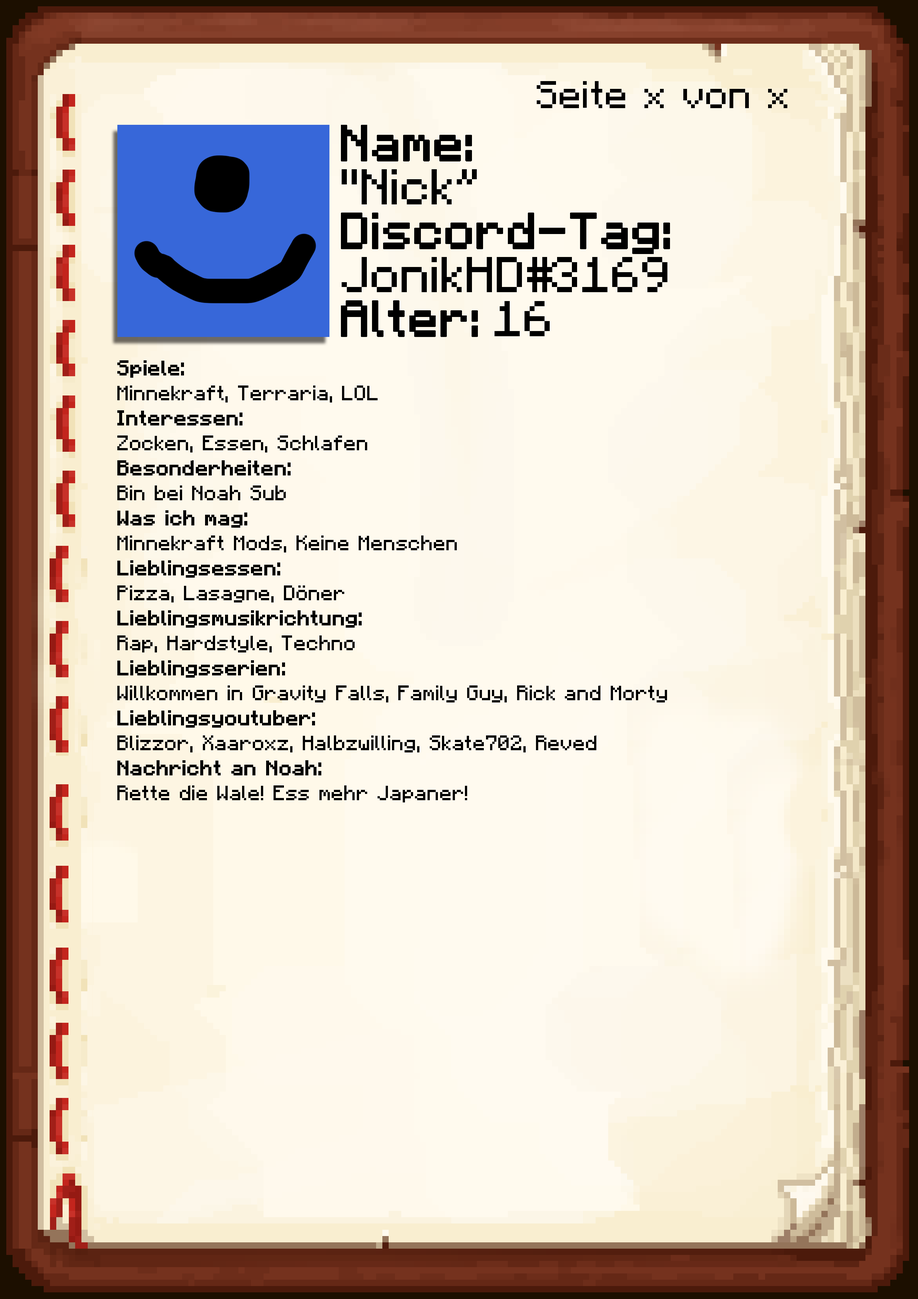
<style>
.page{position:relative;width:918px;height:1299px}
.page>*{position:absolute;margin:0}
.t1{font:38.6px "Minecraft-Regular";color:#000000}
.t2{font:40.1px/43.9px "Minecraft";color:#000000;font-weight:bold}
.t3{font:40.1px/43.9px "Minecraft";color:#000000}
.t4{font:20.8px "Minecraft-Regular";color:#000000}
.t5{font:20.8px "Minecraft-Regular";color:#000000;font-weight:bold}
</style>
<div class="page">
<p class="t1" style="left:537px;top:81px;width:250px;height:27px">Seite x von x</p>
<p class="t2" style="left:341px;top:125px;width:329px;height:212px">Name:<br><span class="t3">"Nick”<br></span>Discord-Tag:<br><span class="t3">JonikHD#3169<br></span>Alter: <span class="t3">16</span></p>
<p class="t4" style="left:117px;top:360px;width:550px;height:442px"><span class="t5">Spiele: <br></span>Minnekraft, Terraria, LOL<br><span class="t5">Interessen:<br></span>Zocken, Essen, Schlafen<br><span class="t5">Besonderheiten:<br></span>Bin bei Noah Sub<br><span class="t5">Was ich mag:<br></span>Minnekraft Mods, Keine Menschen<br><span class="t5">Lieblingsessen:<br></span>Pizza, Lasagne, Döner<br><span class="t5">Lieblingsmusikrichtung:<br></span>Rap, Hardstyle, Techno<br><span class="t5">Lieblingsserien:<br></span>Willkommen in Gravity Falls, Family Guy, Rick and Morty<br><span class="t5">Lieblingsyoutuber:<br></span>Blizzor, Xaaroxz, Halbzwilling, Skate702, Reved<br><span class="t5">Nachricht an Noah:<br></span>Rette die Wale! Ess mehr Japaner!</p>
</div>
